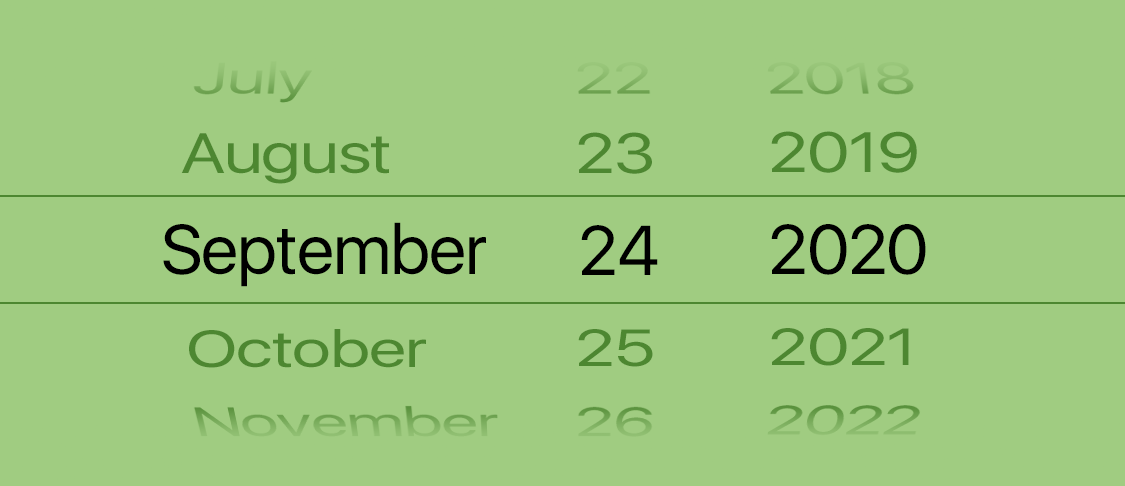
<style>
.page{position:relative;width:1125px;height:486px;background:#a0cc81}
.page>*{position:absolute;margin:0}
.t1{font:56.3px "SFUIDisplay-Regular";letter-spacing:-0.015em;color:#4d8731;scale:1.24 1}
.t2{font:70px "SFUIDisplay-Regular";letter-spacing:-0.015em;color:#000000}
.t3{font:51.9px "SFUIDisplay-Regular";letter-spacing:-0.015em;color:#4d8731;scale:1.35 1}
</style>
<div class="page">
<p class="t1" style="left:181px;top:133px;width:208px;height:51px">August</p>
<p class="t1" style="left:578px;top:132px;width:74px;height:42px">23</p>
<p class="t1" style="left:771px;top:131px;width:146px;height:42px">2019</p>
<p class="t2" style="left:163px;top:222px;width:323px;height:65px">September</p>
<p class="t2" style="left:581px;top:225px;width:77px;height:50px">24</p>
<p class="t2" style="left:771px;top:224px;width:155px;height:51px">2020</p>
<p class="t3" style="left:189px;top:329px;width:237px;height:39px">October</p>
<p class="t3" style="left:578px;top:329px;width:75px;height:38px">25</p>
<p class="t3" style="left:771px;top:328px;width:138px;height:38px">2021</p>
</div>
